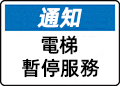
<style>
.page{position:relative;width:120px;height:86px;background:#ffffff}
.page>*{position:absolute;margin:0}
.t1{font:22px "AlibabaPuHuiTiM";color:#ffffff;font-weight:bold;font-style:italic}
.t2{font:20px "AlibabaPuHuiTiM";color:#000000}
</style>
<div class="page">
<p class="t1" style="left:37px;top:7px;width:45px;height:21px">通知</p>
<p class="t2" style="left:41px;top:35px;width:37px;height:20px">電梯</p>
<p class="t2" style="left:22px;top:58px;width:77px;height:20px">暫停服務</p>
</div>
